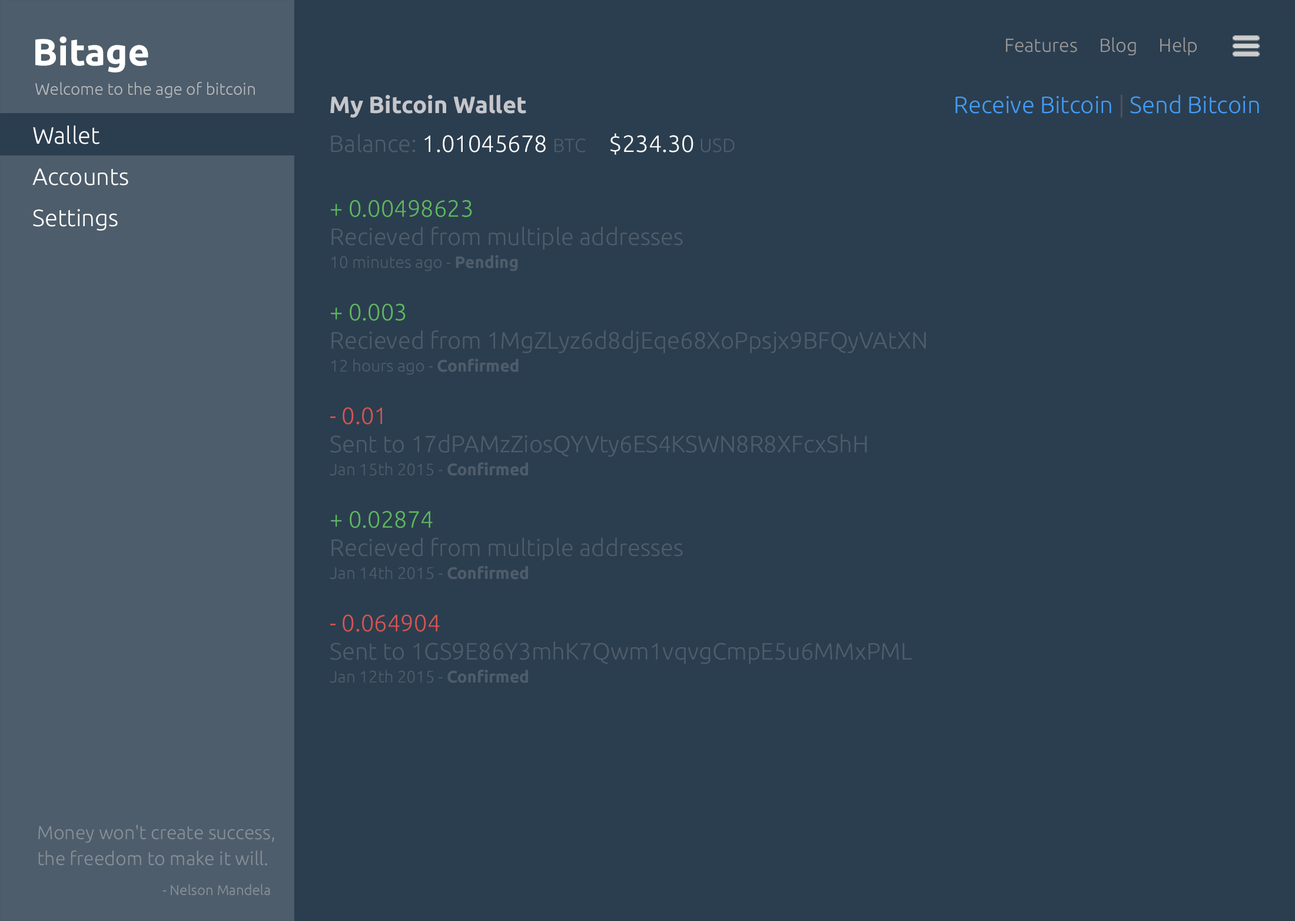
<style>
.page{position:relative;width:1295px;height:921px;background:#2b3e4f}
.page>*{position:absolute;margin:0}
.t1{font:37.7px "Ubuntu-Bold";color:#ffffff}
.t2{font:18.8px "Ubuntu-Light";color:#999999}
.t3{font:16.5px "Ubuntu-Light";color:#b5babe}
.t4{font:23.5px "Ubuntu-Bold";color:#c6c6cb}
.t5{font:23.5px "Ubuntu-Light";color:#439cf7}
.t6{font:23.5px "Ubuntu-Light";color:#545460}
.t7{font:23.5px/41.2px "Ubuntu-Light";color:#ffffff}
.t8{font:23.5px "Ubuntu-Light";color:#ffffff}
.t9{font:23.5px "Ubuntu-Light";color:#4e5d6b}
.t10{font:18.8px "Ubuntu-Light";color:#4e5d6b}
.t11{font:23.5px/28.3px "Ubuntu-Light";color:#4e5d6b}
.t12{font:23.5px/27.1px "Ubuntu-Light";color:#5fb760}
.t13{font:16.5px/23px "Ubuntu-Light";color:#4e5d6b}
.t14{font:16.5px/23px "Ubuntu-Bold";color:#4e5d6b}
.t15{font:23.5px/27.1px "Ubuntu-Light";color:#d75452}
.t16{font:18.8px/25.9px "Ubuntu-Light";color:#879098}
.t17{font:14.1px "Ubuntu-Light";color:#879098}
</style>
<div class="page">
<p class="t1" style="left:35px;top:36px;width:113px;height:36px">Bitage</p>
<p class="t2" style="left:1006px;top:37px;width:191px;height:18px">Features     Blog     Help</p>
<p class="t3" style="left:35px;top:82px;width:220px;height:16px">Welcome to the age of bitcoin</p>
<p class="t4" style="left:330px;top:95px;width:196px;height:23px">My Bitcoin Wallet</p>
<p class="t5" style="left:955px;top:94px;width:304px;height:24px">Receive Bitcoin <span class="t6">| </span>Send Bitcoin</p>
<p class="t7" style="left:32px;top:125px;width:96px;height:106px">Wallet<br>Accounts<br>Settings</p>
<p class="t8" style="left:331px;top:134px;width:255px;height:18px"><span class="t9">Balance: </span>1.01045678 <span class="t10">BTC</span></p>
<p class="t8" style="left:610px;top:133px;width:125px;height:22px">$234.30 <span class="t10">USD</span></p>
<p class="t11" style="left:331px;top:200px;width:352px;height:71px"><span class="t12">+ 0.00498623<br></span>Recieved from multiple addresses<br><span class="t13">10 minutes ago - </span><span class="t14">Pending</span></p>
<p class="t11" style="left:331px;top:303px;width:595px;height:72px"><span class="t12">+ 0.003<br></span>Recieved from 1MgZLyz6d8djEqe68XoPpsjx9BFQyVAtXN<br><span class="t13">12 hours ago - </span><span class="t14">Confirmed</span></p>
<p class="t11" style="left:330px;top:407px;width:537px;height:69px"><span class="t15">- 0.01<br></span>Sent to 17dPAMzZiosQYVty6ES4KSWN8R8XFcxShH<br><span class="t13">Jan 15th 2015 - </span><span class="t14">Confirmed</span></p>
<p class="t11" style="left:330px;top:510px;width:353px;height:69px"><span class="t12">+ 0.02874<br></span>Recieved from multiple addresses<br><span class="t13">Jan 14th 2015 - </span><span class="t14">Confirmed</span></p>
<p class="t11" style="left:330px;top:614px;width:582px;height:69px"><span class="t15">- 0.064904<br></span>Sent to 1GS9E86Y3mhK7Qwm1vqvgCmpE5u6MMxPML<br><span class="t13">Jan 12th 2015 - </span><span class="t14">Confirmed</span></p>
<p class="t16" style="left:38px;top:824px;width:236px;height:41px">Money won't create success,<br>the freedom to make it will.</p>
<p class="t17" style="left:162px;top:884px;width:108px;height:11px">- Nelson Mandela</p>
</div>
